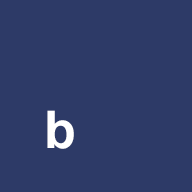
<style>
.page{position:relative;width:192px;height:192px;background:#2d3a67}
.page>*{position:absolute;margin:0}
.t1{font:52px "Arial-BoldMT";color:#ffffff}
</style>
<div class="page">
<p class="t1" style="left:47px;top:110px;width:27px;height:39px">b</p>
</div>
